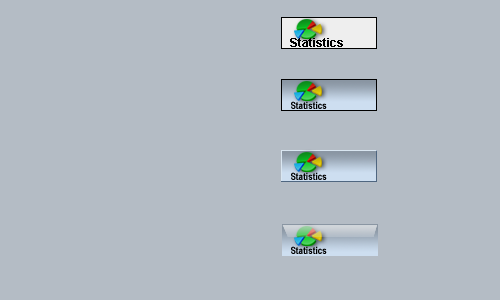
<style>
.page{position:relative;width:500px;height:300px;background:#b4bcc5}
.page>*{position:absolute;margin:0}
.t1{font:12px "Arial-BoldMT";color:#000000}
.t2{font:10px "ArialNarrow-Bold";color:#000000}
</style>
<div class="page">
<p class="t1" style="left:290px;top:38px;width:53px;height:9px">Statistics</p>
<p class="t2" style="left:291px;top:101px;width:36px;height:8px">Statistics</p>
<p class="t2" style="left:291px;top:172px;width:36px;height:8px">Statistics</p>
<p class="t2" style="left:291px;top:246px;width:36px;height:8px">Statistics</p>
</div>
